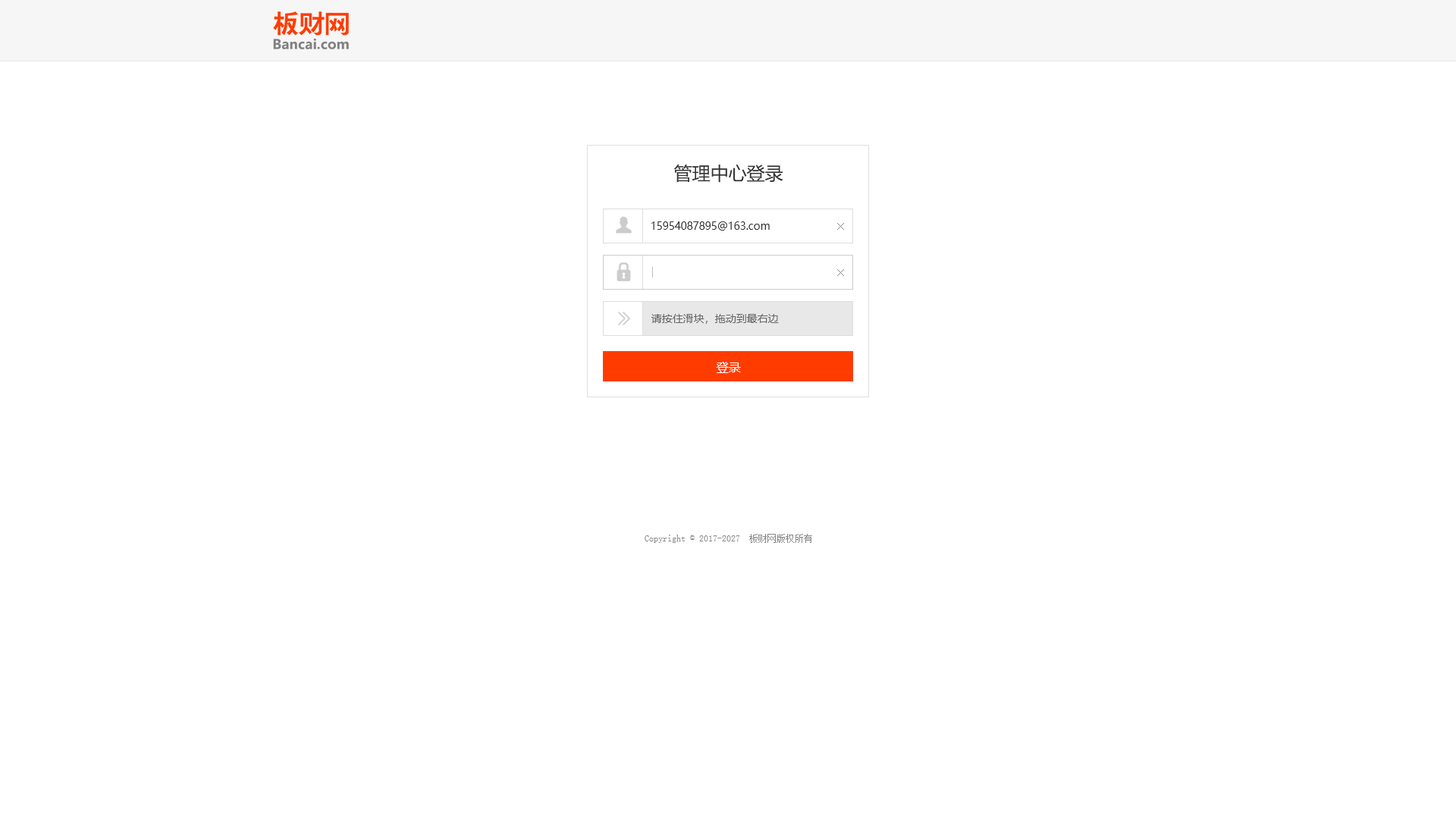
<style>
.page{position:relative;width:1456px;height:819px;background:#ffffff}
.page>*{position:absolute;margin:0}
.t1{font:18.2px "MicrosoftYaHei";color:#333333}
.t2{font:10.6px "MicrosoftYaHei";color:#333333}
.t3{font:10.6px "SimSun";color:#888888}
.t4{font:10.6px "MicrosoftYaHei";color:#666666}
.t5{font:12.1px "MicrosoftYaHei";color:#ffffff}
.t6{font:9.1px "SimSun";color:#888888}
</style>
<div class="page">
<p class="t1" style="left:674px;top:165px;width:109px;height:18px">管理中心登录</p>
<p class="t2" style="left:651px;top:221px;width:119px;height:10px">15954087895@163.com</p>
<p class="t3" style="left:837px;top:223px;width:7px;height:7px">×</p>
<p class="t3" style="left:837px;top:269px;width:7px;height:7px">×</p>
<p class="t4" style="left:651px;top:314px;width:128px;height:10px">请按住滑块，拖动到最右边</p>
<p class="t5" style="left:716px;top:362px;width:25px;height:11px">登录</p>
<p class="t6" style="left:645px;top:534px;width:167px;height:9px">Copyright © 2017-2027  板财网版权所有</p>
</div>
